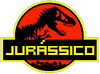
<style>
.page{position:relative;width:100px;height:74px;background:#ffffff}
.page>*{position:absolute;margin:0}
.t1{font:14.7px "Hooge0553";color:#fff500}
</style>
<div class="page">
<p class="t1" style="left:5px;top:40px;width:90px;height:15px">Jurássico</p>
</div>
